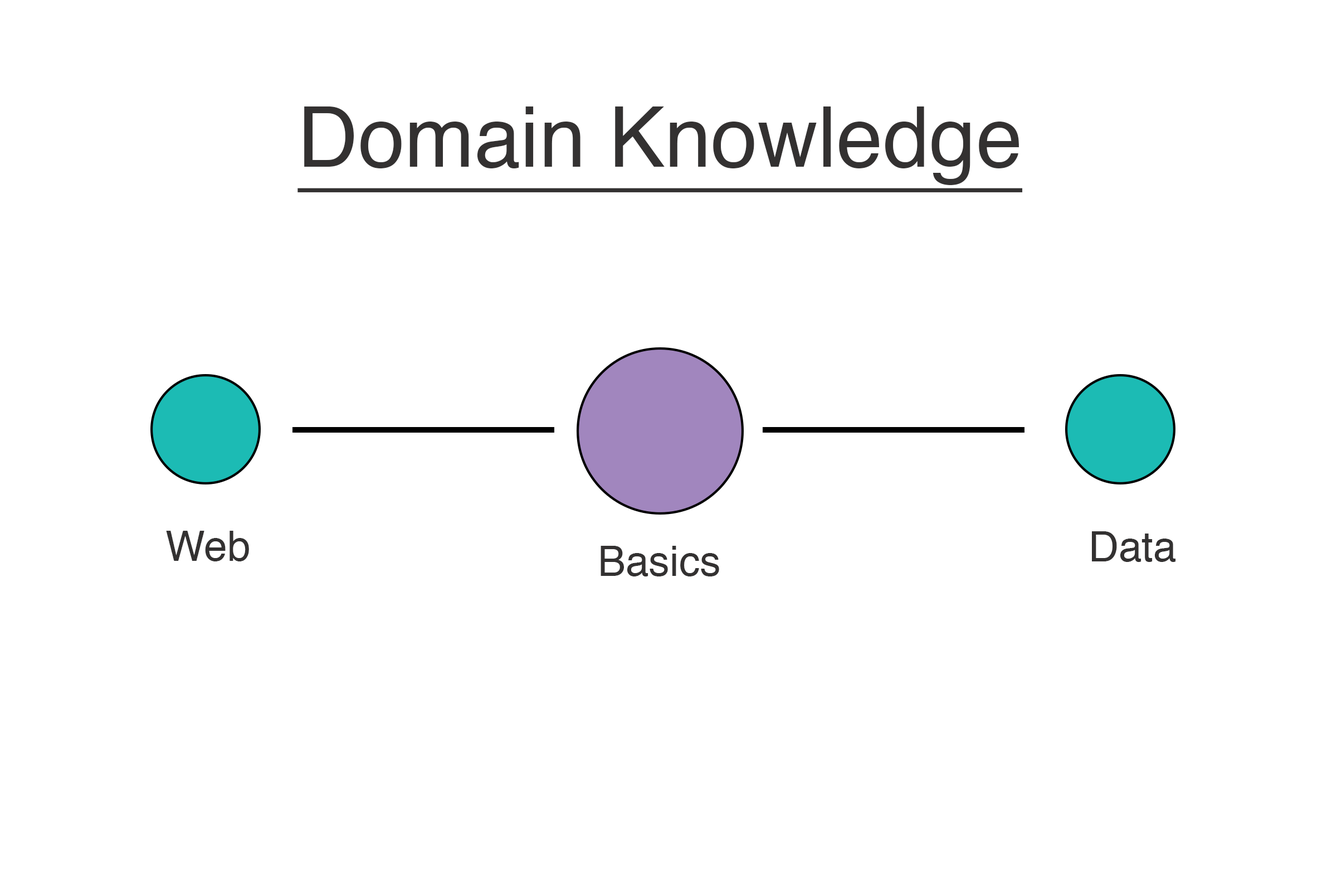
<style>
.page{position:relative;width:1337px;height:892px;background:#ffffff}
.page>*{position:absolute;margin:0}
.t1{font:83.6px "Helvetica";color:#333131;text-decoration:underline}
.t2{font:41.8px "Helvetica";color:#333131}
</style>
<div class="page">
<p class="t1" style="left:298px;top:106px;width:725px;height:86px">Domain Knowledge</p>
<p class="t2" style="left:166px;top:531px;width:83px;height:30px">Web</p>
<p class="t2" style="left:1092px;top:531px;width:84px;height:31px">Data</p>
<p class="t2" style="left:601px;top:546px;width:118px;height:30px">Basics</p>
</div>
